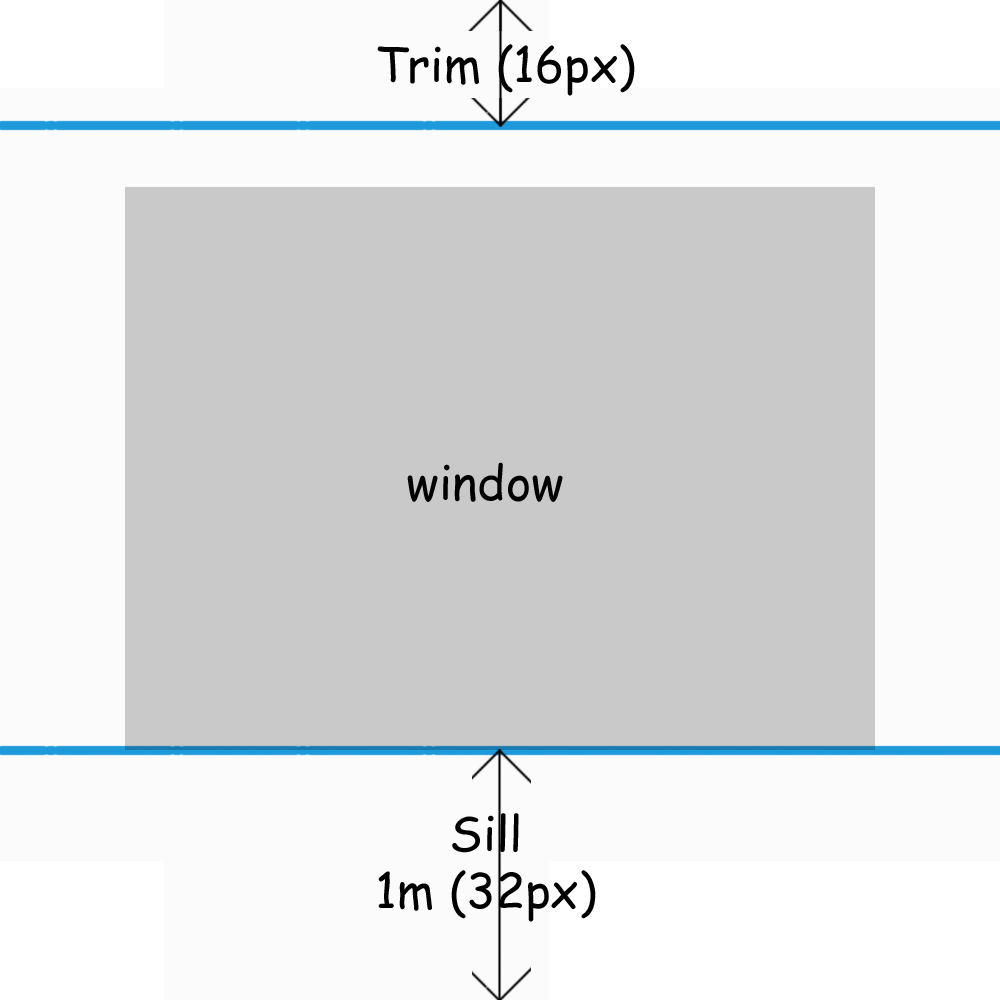
<style>
.page{position:relative;width:1000px;height:1000px;background:#fbfbfb}
.page>*{position:absolute;margin:0}
.t1{font:48px "ComicSansMS";color:#000000}
</style>
<div class="page">
<p class="t1" style="left:377px;top:44px;width:258px;height:52px">Trim (16px)</p>
<p class="t1" style="left:407px;top:462px;width:156px;height:40px">window</p>
<p class="t1" style="left:378px;top:813px;width:218px;height:109px;text-align:center">Sill<br>1m (32px)</p>
</div>
